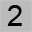
<style>
.page{position:relative;width:32px;height:32px;background:#bbbbbb}
.page>*{position:absolute;margin:0}
.t1{font:28.8px "ArialMT";color:#000000}
</style>
<div class="page">
<p class="t1" style="left:7px;top:5px;width:15px;height:21px">2</p>
</div>
